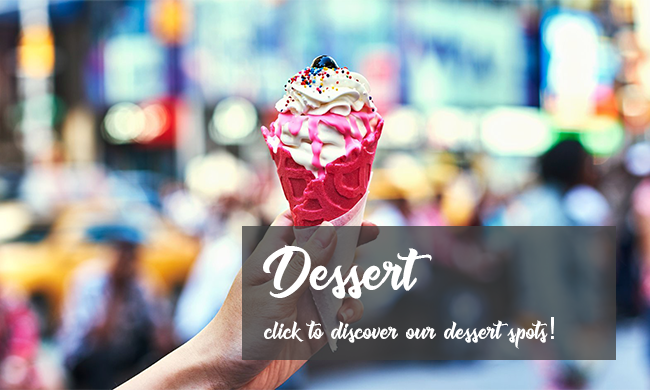
<style>
.page{position:relative;width:650px;height:390px}
.page>*{position:absolute;margin:0}
.t1{font:70px "Muskaters";color:#ffffff}
.t2{font:30px "Muskaters";color:#ffffff}
.t3{font:30px "Helvetica";color:#ffffff}
</style>
<div class="page">
<p class="t1" style="left:263px;top:245px;width:169px;height:54px">Dessert</p>
<p class="t2" style="left:264px;top:317px;width:290px;height:32px">click to discover our dessert spots<span class="t3">!</span></p>
</div>
